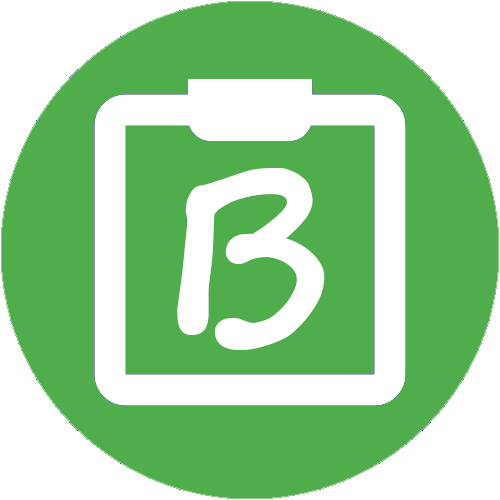
<style>
.page{position:relative;width:500px;height:500px;background:#4fae4b}
.page>*{position:absolute;margin:0}
.t1{font:233.3px "SegoeScript-Bold";color:#ffffff}
</style>
<div class="page">
<p class="t1" style="left:177px;top:168px;width:148px;height:182px">B</p>
</div>
